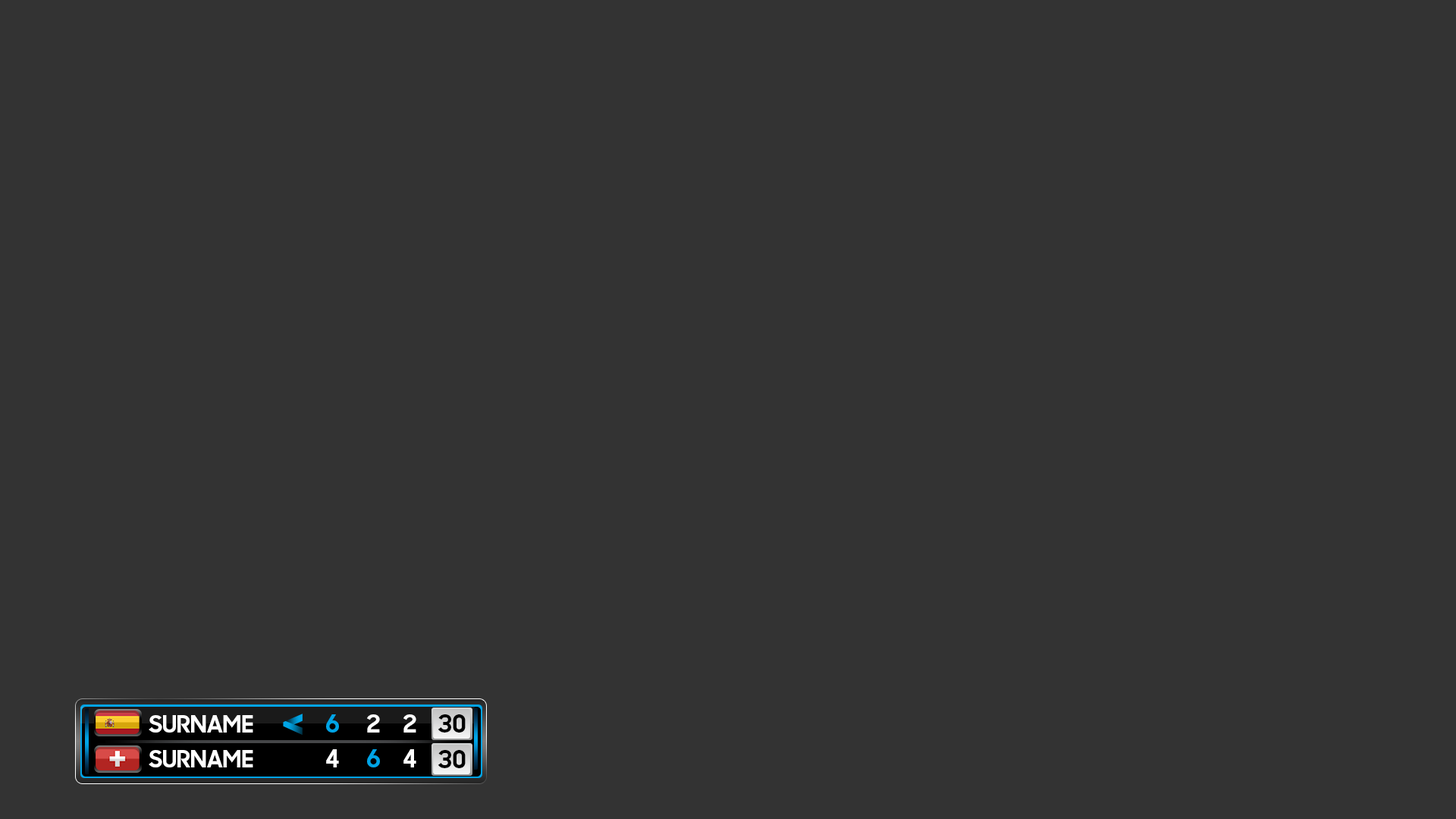
<style>
.page{position:relative;width:1456px;height:819px;background:#333333}
.page>*{position:absolute;margin:0}
.t1{font:23.6px "SharpSansNoOne-Bold";color:#ffffff}
.t2{font:24.4px "SharpSansNoOne-Bold";color:#00a4e6}
.t3{font:24.4px "SharpSansNoOne-Bold";color:#ffffff}
.t4{font:24.4px "SharpSansNoOne-Bold";color:#000000}
</style>
<div class="page">
<p class="t1" style="left:149px;top:715px;width:104px;height:18px">SURNAME</p>
<p class="t2" style="left:326px;top:714px;width:13px;height:19px">6</p>
<p class="t3" style="left:367px;top:714px;width:13px;height:19px">2</p>
<p class="t3" style="left:403px;top:714px;width:13px;height:19px">2</p>
<p class="t4" style="left:438px;top:714px;width:28px;height:19px">30</p>
<p class="t1" style="left:149px;top:750px;width:104px;height:17px">SURNAME</p>
<p class="t3" style="left:326px;top:749px;width:13px;height:18px">4</p>
<p class="t2" style="left:367px;top:749px;width:13px;height:18px">6</p>
<p class="t3" style="left:403px;top:749px;width:13px;height:18px">4</p>
<p class="t4" style="left:438px;top:750px;width:28px;height:18px">30</p>
</div>
